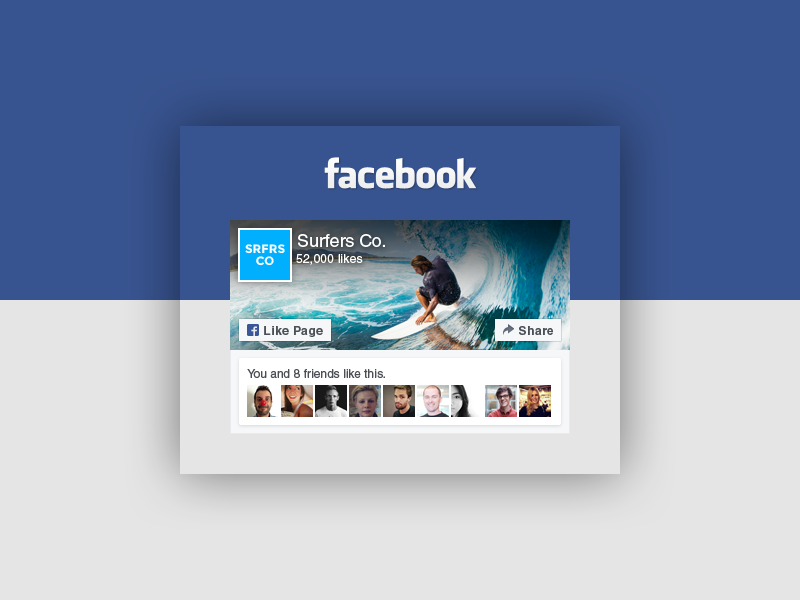
<style>
.page{position:relative;width:800px;height:600px;background:#385490}
.page>*{position:absolute;margin:0}
.t1{font:12px/12px "Montserrat-Bold";color:#ffffff;text-transform:uppercase}
.t2{font:18px "HelveticaLTStd-Roman";color:#ffffff}
.t3{font:12px "HelveticaLTStd-Roman";letter-spacing:0.02em;color:#ffffff}
.t4{font:12px "HelveticaLTStd-Bold";letter-spacing:0.04em;color:#4b4f56}
.t5{font:12px "HelveticaLTStd-Roman";color:#4b4f56}
</style>
<div class="page">
<p class="t1" style="left:245px;top:244px;width:40px;height:22px;text-align:center">Srfrs<br>co</p>
<p class="t2" style="left:298px;top:234px;width:87px;height:13px">Surfers Co.</p>
<p class="t3" style="left:296px;top:254px;width:67px;height:11px">52,000 likes</p>
<p class="t4" style="left:264px;top:326px;width:59px;height:11px">Like Page</p>
<p class="t4" style="left:519px;top:326px;width:34px;height:9px">Share</p>
<p class="t5" style="left:247px;top:369px;width:138px;height:9px">You and 8 friends like this.</p>
</div>
